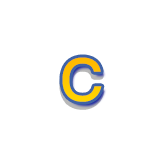
<style>
.page{position:relative;width:164px;height:164px;background:#ffffff}
.page>*{position:absolute;margin:0}
.t1{font:59.8px "PingFangHK-Semibold";color:#ffc500;text-transform:uppercase}
</style>
<div class="page">
<p class="t1" style="left:62px;top:57px;width:40px;height:45px">c</p>
</div>
